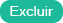
<style>
.page{position:relative;width:63px;height:23px;background:#1cba9b}
.page>*{position:absolute;margin:0}
.t1{font:15.9px "Raavi";color:#ffffff}
</style>
<div class="page">
<p class="t1" style="left:10px;top:6px;width:43px;height:10px">Excluir</p>
</div>
